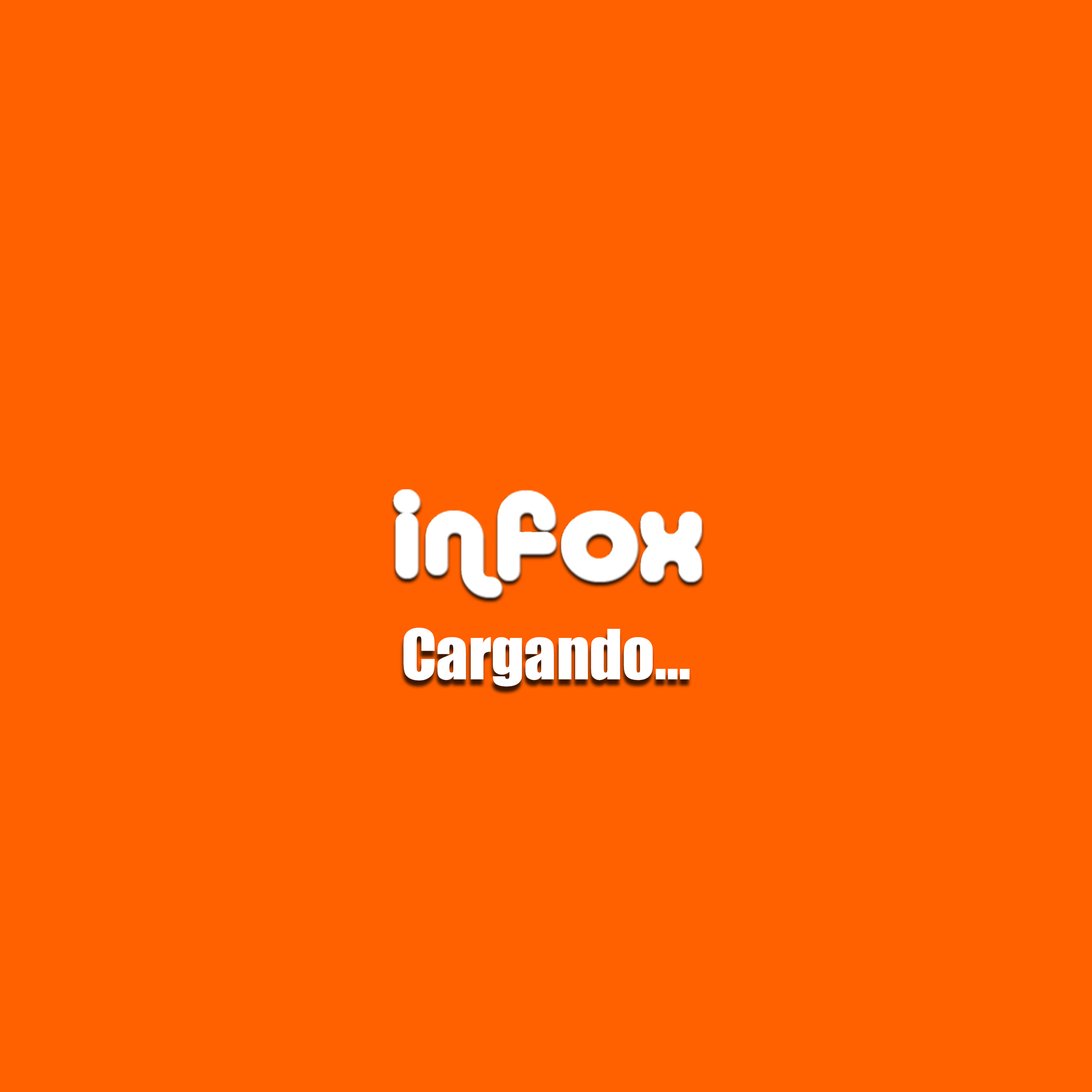
<style>
.page{position:relative;width:1092px;height:1092px;background:#ff6000}
.page>*{position:absolute;margin:0}
.t1{font:63.8px "Impact";color:#ffffff}
</style>
<div class="page">
<p class="t1" style="left:403px;top:628px;width:286px;height:59px">Cargando...</p>
</div>
